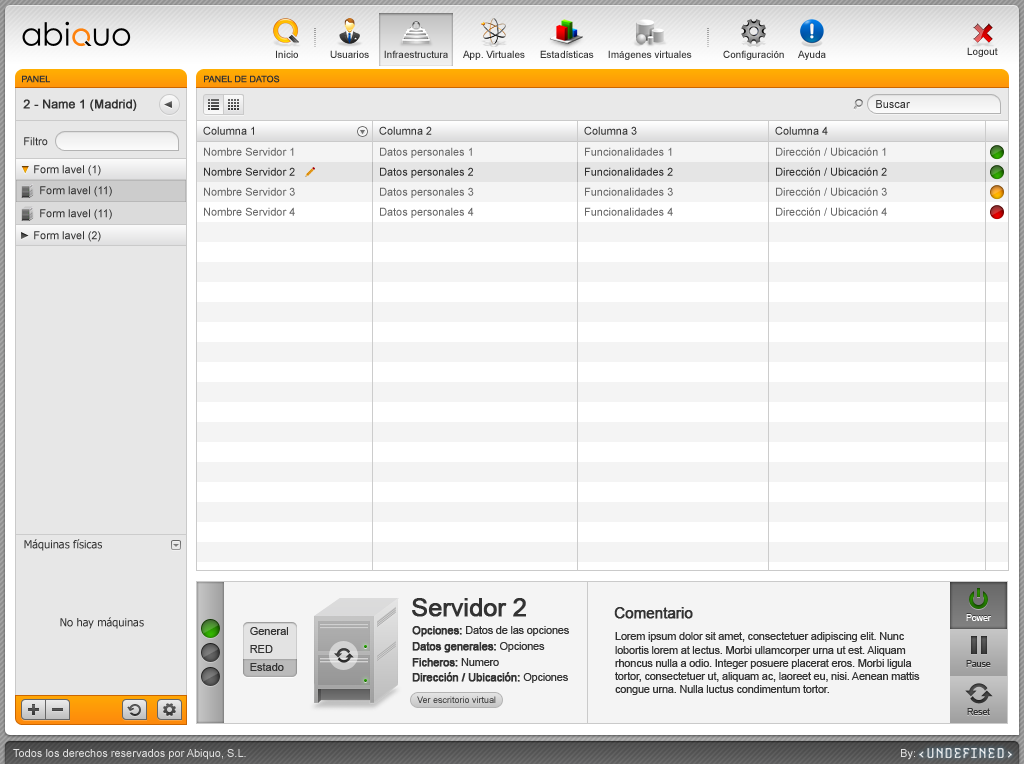
<style>
.page{position:relative;width:1024px;height:764px;background:#f4f4f4}
.page>*{position:absolute;margin:0}
.t1{font:10px "ArialMT";color:#333333}
.t2{font:9px "ArialMT";color:#333333}
.t3{font:12px "ArialMT";color:#333333;font-weight:bold}
.t4{font:11px "ArialMT";color:#333333}
.t5{font:11px "ArialMT";color:#666666}
.t6{font:11px "Tahoma";color:#333333}
.t7{font:25px "ArialMT";letter-spacing:-0.02em;color:#333333;font-weight:bold}
.t8{font:15px "ArialMT";letter-spacing:-0.02em;color:#333333;font-weight:bold}
.t9{font:9px "ArialMT";letter-spacing:-0.02em;color:#ffffff}
.t10{font:11px "ArialMT";letter-spacing:-0.02em;color:#333333}
.t11{font:11px "ArialMT";letter-spacing:-0.02em;color:#333333;font-weight:bold}
.t12{font:9px "ArialMT";letter-spacing:-0.02em;color:#333333}
.t13{font:11px "ArialMT";color:#e0e0e0}
</style>
<div class="page">
<p class="t1" style="left:276px;top:50px;width:22px;height:8px">Inicio</p>
<p class="t1" style="left:330px;top:50px;width:39px;height:8px">Usuarios</p>
<p class="t1" style="left:384px;top:50px;width:64px;height:8px">Infraestructura</p>
<p class="t1" style="left:463px;top:50px;width:62px;height:10px">App. Virtuales</p>
<p class="t1" style="left:540px;top:50px;width:54px;height:8px">Estadísticas</p>
<p class="t1" style="left:608px;top:50px;width:84px;height:10px">Imágenes virtuales</p>
<p class="t1" style="left:723px;top:50px;width:61px;height:10px">Configuración</p>
<p class="t1" style="left:798px;top:50px;width:28px;height:10px">Ayuda</p>
<p class="t1" style="left:967px;top:47px;width:31px;height:10px">Logout</p>
<p class="t2" style="left:22px;top:75px;width:28px;height:8px">PANEL</p>
<p class="t2" style="left:204px;top:75px;width:76px;height:8px">PANEL DE DATOS</p>
<p class="t3" style="left:23px;top:99px;width:114px;height:12px">2 - Name 1 (Madrid)</p>
<p class="t4" style="left:876px;top:100px;width:34px;height:8px">Buscar</p>
<p class="t4" style="left:203px;top:126px;width:51px;height:9px">Columna 1</p>
<p class="t4" style="left:379px;top:126px;width:53px;height:9px">Columna 2</p>
<p class="t4" style="left:584px;top:126px;width:53px;height:9px">Columna 3</p>
<p class="t4" style="left:775px;top:126px;width:53px;height:9px">Columna 4</p>
<p class="t4" style="left:24px;top:137px;width:24px;height:9px">Filtro</p>
<p class="t5" style="left:204px;top:147px;width:90px;height:9px">Nombre Servidor 1</p>
<p class="t5" style="left:380px;top:147px;width:92px;height:11px">Datos personales 1</p>
<p class="t5" style="left:585px;top:147px;width:87px;height:9px">Funcionalidades 1</p>
<p class="t5" style="left:776px;top:147px;width:110px;height:9px">Dirección / Ubicación 1</p>
<p class="t4" style="left:34px;top:165px;width:67px;height:11px">Form lavel (1)</p>
<p class="t4" style="left:204px;top:167px;width:91px;height:9px">Nombre Servidor 2</p>
<p class="t4" style="left:380px;top:167px;width:93px;height:11px">Datos personales 2</p>
<p class="t4" style="left:585px;top:167px;width:88px;height:9px">Funcionalidades 2</p>
<p class="t4" style="left:776px;top:167px;width:111px;height:9px">Dirección / Ubicación 2</p>
<p class="t4" style="left:40px;top:186px;width:72px;height:11px">Form lavel (11)</p>
<p class="t5" style="left:204px;top:187px;width:91px;height:9px">Nombre Servidor 3</p>
<p class="t5" style="left:380px;top:187px;width:94px;height:11px">Datos personales 3</p>
<p class="t5" style="left:585px;top:187px;width:88px;height:9px">Funcionalidades 3</p>
<p class="t5" style="left:776px;top:187px;width:111px;height:9px">Dirección / Ubicación 3</p>
<p class="t4" style="left:40px;top:209px;width:72px;height:11px">Form lavel (11)</p>
<p class="t5" style="left:204px;top:207px;width:91px;height:9px">Nombre Servidor 4</p>
<p class="t5" style="left:380px;top:207px;width:94px;height:11px">Datos personales 4</p>
<p class="t5" style="left:585px;top:207px;width:88px;height:9px">Funcionalidades 4</p>
<p class="t5" style="left:776px;top:207px;width:111px;height:9px">Dirección / Ubicación 4</p>
<p class="t4" style="left:34px;top:231px;width:67px;height:11px">Form lavel (2)</p>
<p class="t6" style="left:24px;top:539px;width:78px;height:12px">Máquinas físicas</p>
<p class="t7" style="left:412px;top:598px;width:114px;height:19px">Servidor 2</p>
<p class="t6" style="left:60px;top:617px;width:84px;height:12px">No hay máquinas</p>
<p class="t8" style="left:614px;top:607px;width:79px;height:12px">Comentario</p>
<p class="t9" style="left:966px;top:614px;width:25px;height:7px">Power</p>
<p class="t4" style="left:250px;top:627px;width:38px;height:8px">General</p>
<p class="t10" style="left:412px;top:626px;width:157px;height:11px"><span class="t11">Opciones: </span>Datos de las opciones</p>
<p class="t10" style="left:615px;top:632px;width:305px;height:63px">Lorem ipsum dolor sit amet, consectetuer adipiscing elit. Nunc lobortis lorem at lectus. Morbi ullamcorper urna ut est. Aliquam rhoncus nulla a odio. Integer posuere placerat eros. Morbi ligula tortor, consectetuer ut, aliquam ac, laoreet eu, nisi. Aenean mattis congue urna. Nulla luctus condimentum tortor.</p>
<p class="t4" style="left:250px;top:645px;width:23px;height:8px">RED</p>
<p class="t11" style="left:412px;top:642px;width:133px;height:11px">Datos generales: <span class="t10">Opciones</span></p>
<p class="t4" style="left:250px;top:663px;width:34px;height:8px">Estado</p>
<p class="t11" style="left:412px;top:658px;width:87px;height:9px">Ficheros: <span class="t10">Numero</span></p>
<p class="t12" style="left:966px;top:660px;width:25px;height:7px">Pause</p>
<p class="t11" style="left:412px;top:672px;width:156px;height:11px">Dirección / Ubicación: <span class="t10">Opciones</span></p>
<p class="t2" style="left:417px;top:696px;width:79px;height:7px">Ver escritorio virtual</p>
<p class="t12" style="left:967px;top:708px;width:23px;height:7px">Reset</p>
<p class="t13" style="left:13px;top:749px;width:233px;height:11px">Todos los derechos reservados por Abiquo, S.L.</p>
<p class="t13" style="left:901px;top:749px;width:14px;height:11px">By:</p>
</div>
